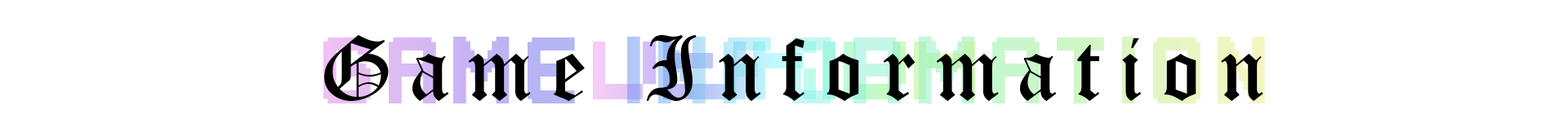
<style>
.page{position:relative;width:1568px;height:136px;background:#ffffff}
.page>*{position:absolute;margin:0}
.t1{font:89.4px "OldEnglishTextMT";letter-spacing:0.2em;color:#000000}
</style>
<div class="page">
<p class="t1" style="left:324px;top:35px;width:939px;height:66px">Game Information</p>
</div>
